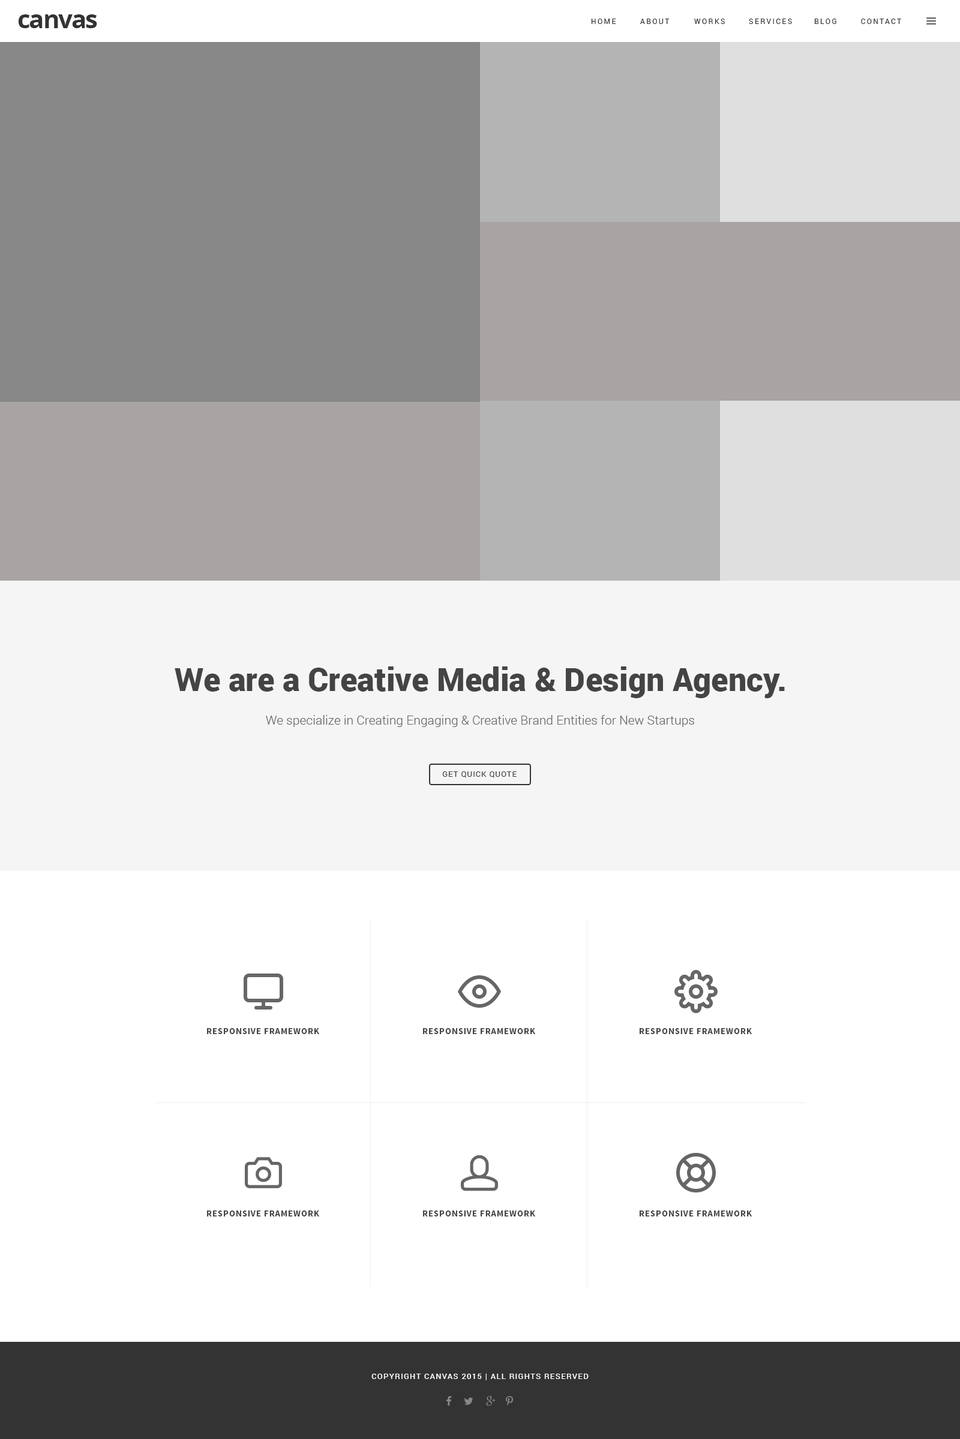
<style>
.page{position:relative;width:960px;height:1439px;background:#ffffff}
.page>*{position:absolute;margin:0}
.t1{font:25.2px "OpenSans-Bold";letter-spacing:-0.05em;color:#333333}
.t2{font:7.2px "Roboto-Regular";letter-spacing:0.2em;color:#333333}
.t3{font:7.2px "Roboto-Regular";letter-spacing:0.2em;color:#333333;text-transform:uppercase}
.t4{font:32.4px "Roboto-Black";color:#444444}
.t5{font:12.6px "Roboto-Light";color:#666666}
.t6{font:7.8px "Roboto-Regular";letter-spacing:0.075em;color:#444444;text-transform:uppercase}
.t7{font:9px "SourceSansPro-Bold";letter-spacing:0.05em;color:#444444;text-transform:uppercase}
.t8{font:7.8px "Roboto-Medium";letter-spacing:0.1em;color:#ffffff;text-transform:uppercase}
</style>
<div class="page">
<p class="t1" style="left:18px;top:14px;width:79px;height:14px">canvas</p>
<p class="t2" style="left:591px;top:19px;width:25px;height:5px">HOME</p>
<p class="t3" style="left:640px;top:19px;width:30px;height:5px">About</p>
<p class="t2" style="left:694px;top:19px;width:31px;height:5px">WORKS</p>
<p class="t3" style="left:749px;top:19px;width:43px;height:5px">Services</p>
<p class="t2" style="left:814px;top:19px;width:22px;height:5px">BLOG</p>
<p class="t3" style="left:861px;top:19px;width:40px;height:5px">Contact</p>
<p class="t4" style="left:175px;top:667px;width:610px;height:31px">We are a Creative Media &amp; Design Agency.</p>
<p class="t5" style="left:266px;top:715px;width:428px;height:12px">We specialize in Creating Engaging &amp; Creative Brand Entities for New Startups</p>
<p class="t6" style="left:442px;top:772px;width:75px;height:6px">GET QUICK QUOTE</p>
<p class="t7" style="left:207px;top:1028px;width:113px;height:6px">Responsive Framework</p>
<p class="t7" style="left:423px;top:1028px;width:113px;height:6px">Responsive Framework</p>
<p class="t7" style="left:640px;top:1028px;width:112px;height:6px">Responsive Framework</p>
<p class="t7" style="left:207px;top:1211px;width:113px;height:6px">Responsive Framework</p>
<p class="t7" style="left:423px;top:1211px;width:113px;height:6px">Responsive Framework</p>
<p class="t7" style="left:640px;top:1211px;width:112px;height:6px">Responsive Framework</p>
<p class="t8" style="left:371px;top:1374px;width:218px;height:7px">Copyright Canvas 2015 | All Rights Reserved</p>
</div>
